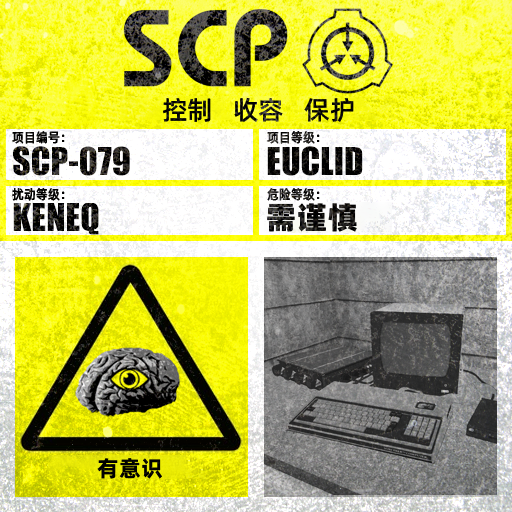
<style>
.page{position:relative;width:512px;height:512px}
.page>*{position:absolute;margin:0}
.t1{font:26px "AlibabaPuHuiTiM";color:#000000}
.t2{font:13.3px "AlibabaPuHuiTiM";letter-spacing:0.02em;color:#000000;scale:0.9 1}
.t3{font:13.3px "AlibabaPuHuiTiM";letter-spacing:0.02em;scale:0.9 1}
.t4{font:30.3px "AlibabaPuHuiTiH";letter-spacing:0.02em}
.t5{font:22px "AlibabaPuHuiTiB";letter-spacing:0.02em;color:#000000}
</style>
<div class="page">
<p class="t1" style="left:163px;top:97px;width:191px;height:26px">控制   收容   保护</p>
<p class="t2" style="left:12px;top:131px;width:53px;height:13px">项目编号：</p>
<p class="t3" style="left:267px;top:131px;width:53px;height:13px">项目等级：</p>
<p class="t2" style="left:12px;top:188px;width:53px;height:13px">扰动等级：</p>
<p class="t3" style="left:267px;top:188px;width:53px;height:13px">危险等级：</p>
<p class="t4" style="left:267px;top:203px;width:90px;height:29px">需谨慎</p>
<p class="t5" style="left:97px;top:458px;width:65px;height:21px">有意识</p>
</div>
